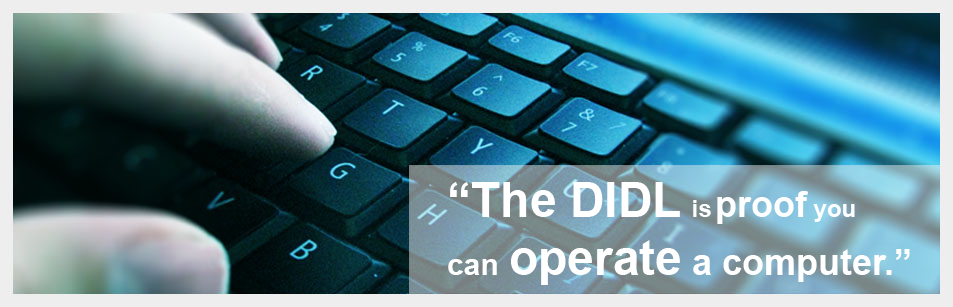
<style>
.page{position:relative;width:953px;height:307px}
.page>*{position:absolute;margin:0}
.t1{font:36px "Arial-BoldMT";color:#ffffff}
.t2{font:48px "Arial-BoldMT";color:#ffffff}
.t3{font:24px "Arial-BoldMT";color:#ffffff}
.t4{font:30px "Arial-BoldMT";color:#ffffff}
</style>
<div class="page">
<p class="t1" style="left:448px;top:182px;width:462px;height:103px"><span class="t2">“The DIDL </span><span class="t3">is </span>proof<span class="t3"> you <br></span><span class="t4">can </span><span class="t2">operate</span> a computer.”</p>
</div>
